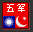
<style>
.page{position:relative;width:33px;height:32px;background:#f20000}
.page>*{position:absolute;margin:0}
.t1{font:10.4px "SimSun";color:#ffffff}
</style>
<div class="page">
<p class="t1" style="left:7px;top:4px;width:18px;height:8px">五军</p>
</div>
